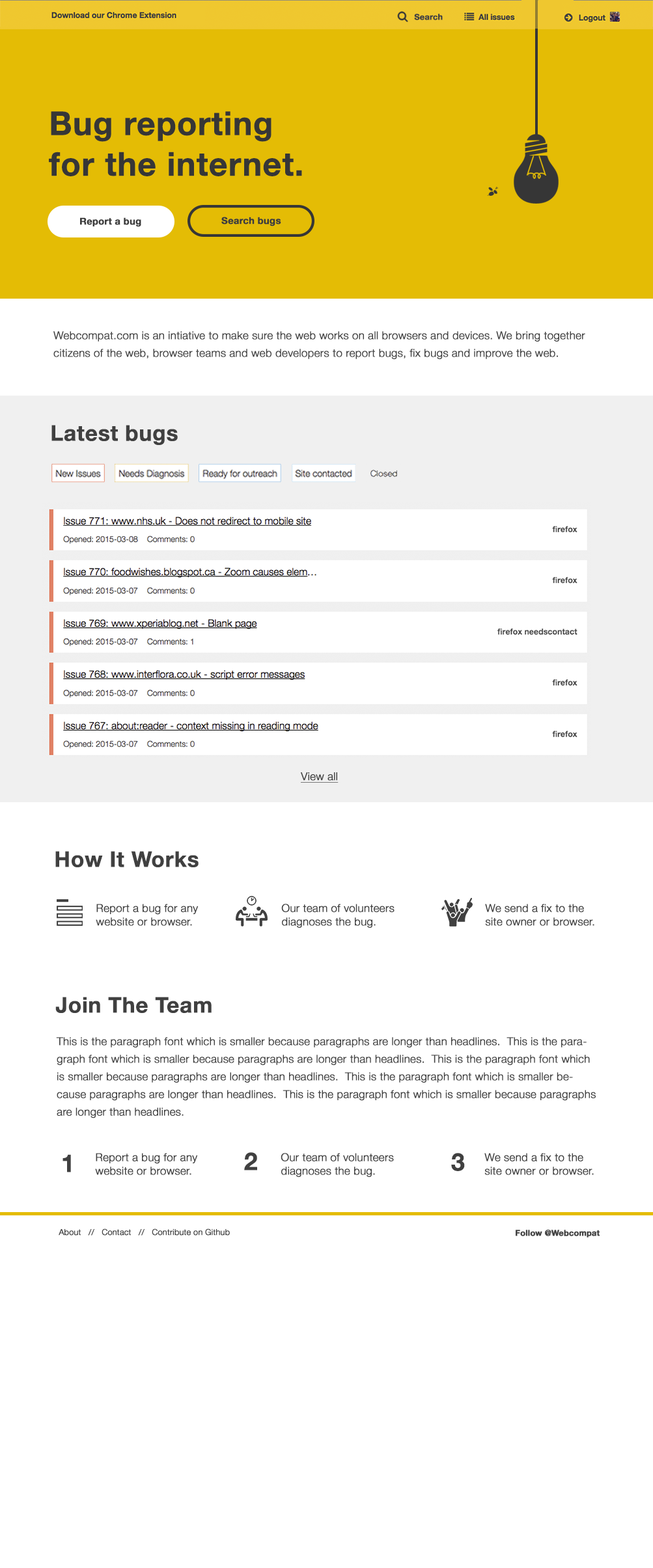
<style>
.page{position:relative;width:653px;height:1568px;background:#ffffff}
.page>*{position:absolute;margin:0}
.t1{font:8.1px "HelveticaNeue-Bold";color:#404042;font-weight:bold}
.t2{font:32.5px/40.7px "HelveticaNeue-Bold";color:#363636;font-weight:bold}
.t3{font:9.5px "HelveticaNeue-Bold";color:#3c3c3c;font-weight:bold}
.t4{font:10.8px/17.6px "HelveticaNeue-Light";color:#424242;font-weight:bold}
.t5{font:21.7px "HelveticaNeue-Bold";color:#404040;font-weight:bold}
.t6{font:10.8px "HelveticaNeue-Light";color:#404040;font-weight:bold;text-decoration:underline}
.t7{font:10.8px/13.6px "HelveticaNeue-Light";color:#404040;font-weight:bold}
.t8{font:24.4px "HelveticaNeue-Bold";color:#404040;font-weight:bold}
.t9{font:8.1px "HelveticaNeue-Light";color:#424242;font-weight:bold}
.t10{font:8.1px "HelveticaNeue-Bold";color:#424242;font-weight:bold}
</style>
<div class="page">
<p class="t1" style="left:414px;top:14px;width:28px;height:6px">Search</p>
<p class="t2" style="left:49px;top:111px;width:253px;height:65px">Bug reporting<br>for the internet.</p>
<p class="t3" style="left:80px;top:217px;width:61px;height:10px">Report a bug</p>
<p class="t3" style="left:221px;top:217px;width:60px;height:9px">Search bugs</p>
<p class="t4" style="left:53px;top:331px;width:532px;height:28px">Webcompat.com is an intiative to make sure the web works on all browsers and devices. We bring together citizens of the web, browser teams and web developers to report bugs, fix bugs and improve the web.</p>
<p class="t5" style="left:51px;top:425px;width:127px;height:20px">Latest bugs</p>
<p class="t6" style="left:301px;top:772px;width:37px;height:11px">View all</p>
<p class="t5" style="left:55px;top:851px;width:143px;height:16px">How It Works</p>
<p class="t7" style="left:96px;top:904px;width:102px;height:22px">Report a bug for any<br>website or browser.</p>
<p class="t7" style="left:281px;top:904px;width:113px;height:24px">Our team of volunteers<br>diagnoses the bug.</p>
<p class="t7" style="left:485px;top:904px;width:109px;height:22px">We send a fix to the <br>site owner or browser.</p>
<p class="t5" style="left:55px;top:997px;width:156px;height:16px">Join The Team</p>
<p class="t4" style="left:56px;top:1037px;width:539px;height:81px">This is the paragraph font which is smaller because paragraphs are longer than headlines.  This is the paragraph font which is smaller because paragraphs are longer than headlines.  This is the paragraph font which is smaller because paragraphs are longer than headlines.  This is the paragraph font which is smaller because paragraphs are longer than headlines.  This is the paragraph font which is smaller because paragraphs are longer than headlines.</p>
<p class="t8" style="left:62px;top:1154px;width:9px;height:18px">1</p>
<p class="t7" style="left:95px;top:1153px;width:103px;height:22px">Report a bug for any<br>website or browser.</p>
<p class="t8" style="left:244px;top:1152px;width:13px;height:18px">2</p>
<p class="t7" style="left:280px;top:1153px;width:114px;height:24px">Our team of volunteers<br>diagnoses the bug.</p>
<p class="t8" style="left:451px;top:1153px;width:14px;height:18px">3</p>
<p class="t7" style="left:484px;top:1153px;width:109px;height:22px">We send a fix to the <br>site owner or browser.</p>
<p class="t9" style="left:59px;top:1228px;width:171px;height:8px">About   //   Contact   //   Contribute on Github</p>
<p class="t10" style="left:515px;top:1230px;width:84px;height:7px">Follow @Webcompat</p>
</div>
